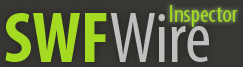
<style>
.page{position:relative;width:243px;height:67px}
.page>*{position:absolute;margin:0}
.t1{font:24px "MyriadPro-Cond";color:#a4da22}
.t2{font:72px "MyriadPro-Cond";color:#bfbfbf}
.t3{font:72px "MyriadPro-BoldCond";color:#a4da22}
</style>
<div class="page">
<p class="t1" style="left:170px;top:5px;width:68px;height:22px">Inspector</p>
<p class="t2" style="left:5px;top:13px;width:204px;height:49px"><span class="t3">SWF</span>Wire</p>
</div>
